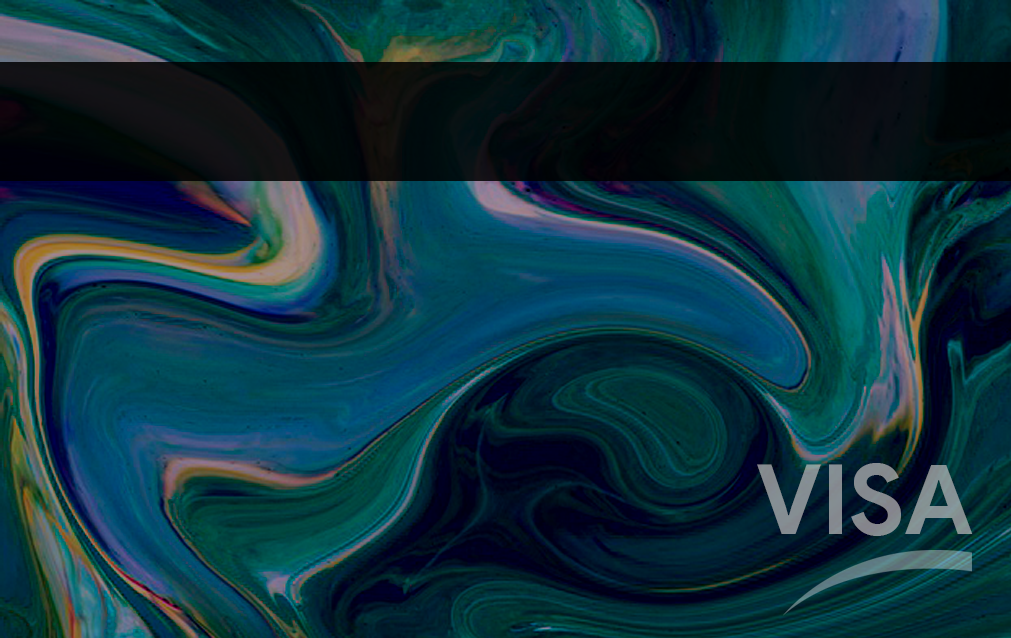
<style>
.page{position:relative;width:1011px;height:638px}
.page>*{position:absolute;margin:0}
.t1{font:96.9px "ProductSans-Bold";color:#858d92;text-transform:uppercase}
</style>
<div class="page">
<p class="t1" style="left:757px;top:463px;width:216px;height:73px">VISA</p>
</div>
